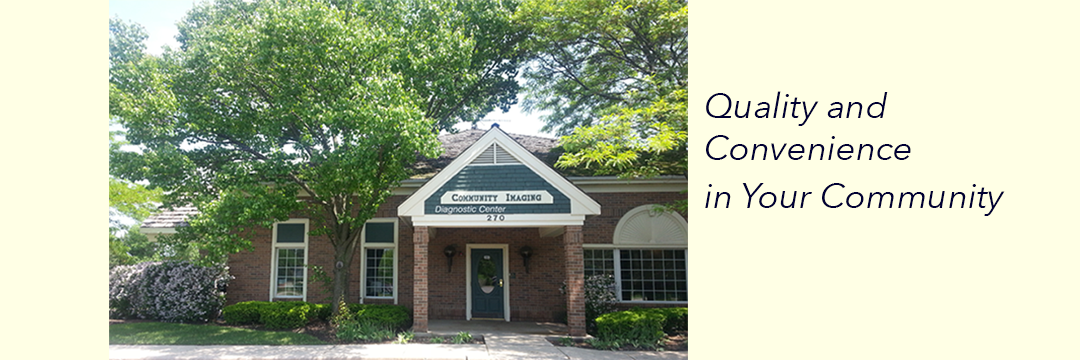
<style>
.page{position:relative;width:1080px;height:360px;background:#ffffe5}
.page>*{position:absolute;margin:0}
.t1{font:35px "AvenirNext-Italic";color:#000033}
</style>
<div class="page">
<p class="t1" style="left:705px;top:91px;width:300px;height:125px">Quality and <br>Convenience<br>in Your Community</p>
</div>
